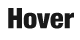
<style>
.page{position:relative;width:80px;height:40px;background:#ffffff}
.page>*{position:absolute;margin:0}
.t1{font:28px "Harvest";color:#191919}
</style>
<div class="page">
<p class="t1" style="left:8px;top:8px;width:66px;height:21px">Hover</p>
</div>
